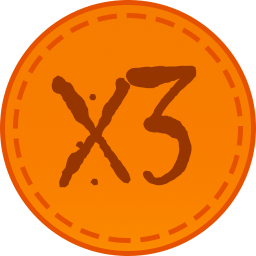
<style>
.page{position:relative;width:256px;height:256px;background:#ffffff}
.page>*{position:absolute;margin:0}
.t1{font:172.7px "Chiller-Regular";letter-spacing:-0.01em;color:#973500;text-transform:uppercase;font-weight:bold;scale:0.91 1}
</style>
<div class="page">
<p class="t1" style="left:51px;top:65px;width:146px;height:123px">x3</p>
</div>
